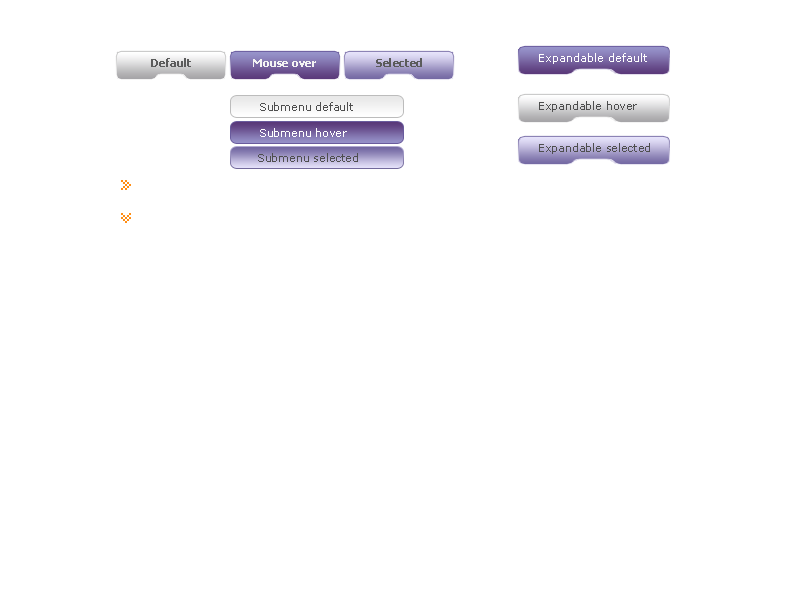
<style>
.page{position:relative;width:800px;height:600px;background:#ffffff}
.page>*{position:absolute;margin:0}
.t1{font:11px "Verdana";color:#ffffff}
.t2{font:11px "Tahoma-Bold";color:#5b5b5b}
.t3{font:11px "Tahoma-Bold";color:#f3f3f3}
.t4{font:11px "Verdana";color:#4e4e4e}
</style>
<div class="page">
<p class="t1" style="left:539px;top:53px;width:108px;height:11px">Expandable default</p>
<p class="t2" style="left:151px;top:58px;width:40px;height:9px">Default</p>
<p class="t3" style="left:253px;top:59px;width:63px;height:8px">Mouse over</p>
<p class="t2" style="left:376px;top:58px;width:46px;height:9px">Selected</p>
<p class="t4" style="left:260px;top:102px;width:93px;height:9px">Submenu default</p>
<p class="t4" style="left:539px;top:101px;width:98px;height:11px">Expandable hover</p>
<p class="t1" style="left:260px;top:128px;width:87px;height:9px">Submenu hover</p>
<p class="t4" style="left:539px;top:143px;width:111px;height:11px">Expandable selected</p>
<p class="t4" style="left:258px;top:153px;width:100px;height:9px">Submenu selected</p>
</div>
